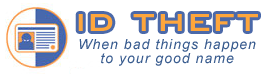
<style>
.page{position:relative;width:270px;height:74px;background:#ffffff}
.page>*{position:absolute;margin:0}
.t1{font:40px "BankGothicBT-Medium";letter-spacing:0.025em;color:#fea63c}
.t2{font:14px/36px "Arial-ItalicMT";letter-spacing:0.075em;color:#395c8f}
.t3{font:14px/14px "Arial-ItalicMT";letter-spacing:0.075em;color:#395c8f}
</style>
<div class="page">
<p class="t1" style="left:78px;top:14px;width:180px;height:17px">id theft</p>
<p class="t2" style="left:79px;top:39px;width:177px;height:27px;text-align:center">When bad things happen<span class="t3"> <br>to your good name</span></p>
</div>
